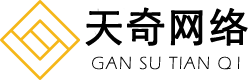
<style>
.page{position:relative;width:250px;height:80px;background:#ffffff}
.page>*{position:absolute;margin:0}
.t1{font:40px "STXihei";letter-spacing:0.01em;color:#010101;font-weight:bold}
.t2{font:18px "ErasITC-Light";letter-spacing:0.081em;color:#000000}
</style>
<div class="page">
<p class="t1" style="left:85px;top:7px;width:163px;height:39px">天奇网络</p>
<p class="t2" style="left:92px;top:56px;width:148px;height:14px">GAN SU TIAN Q I</p>
</div>
